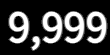
<style>
.page{position:relative;width:110px;height:55px;background:#000000}
.page>*{position:absolute;margin:0}
.t1{font:40px "WebPSD-18463539-0-Regular";color:#ffffff;font-weight:bold}
</style>
<div class="page">
<p class="t1" style="left:0px;top:0px;width:110px;height:55px">9,999</p>
</div>
